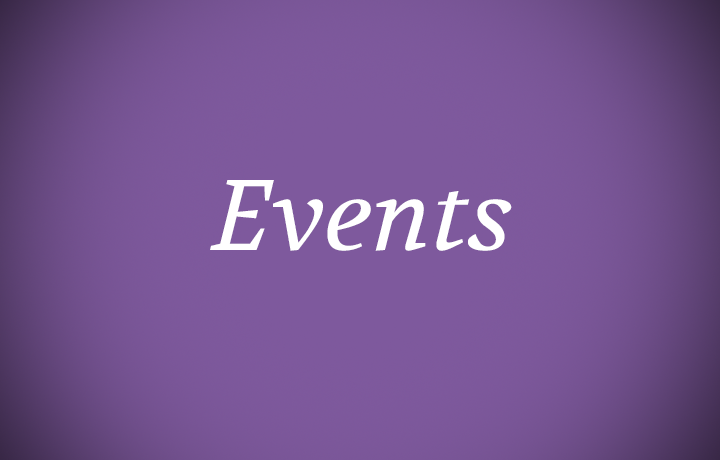
<style>
.page{position:relative;width:720px;height:460px}
.page>*{position:absolute;margin:0}
.t1{font:100px "Volkhov-Italic";color:#ffffff}
</style>
<div class="page">
<p class="t1" style="left:210px;top:180px;width:302px;height:71px">Events</p>
</div>
